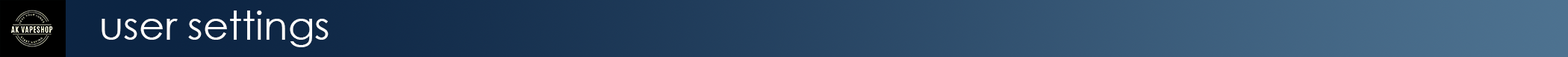
<style>
.page{position:relative;width:1568px;height:57px}
.page>*{position:absolute;margin:0}
.t1{font:39.7px "CenturyGothic";color:#ffffff}
</style>
<div class="page">
<p class="t1" style="left:102px;top:10px;width:227px;height:37px">user settings</p>
</div>
